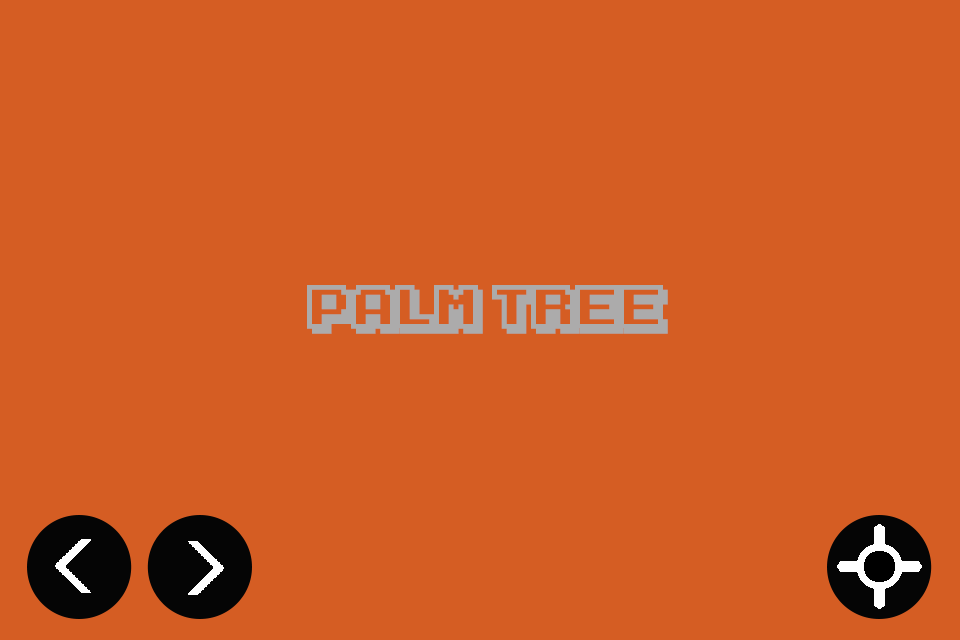
<style>
.page{position:relative;width:960px;height:640px;background:#d55d23}
.page>*{position:absolute;margin:0}
.t1{font:50px "KarmaticArcade";color:#acabab}
</style>
<div class="page">
<p class="t1" style="left:307px;top:285px;width:361px;height:49px">Palm Tree</p>
</div>
